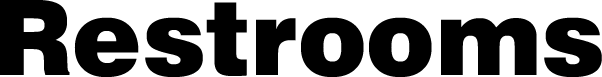
<style>
.page{position:relative;width:602px;height:77px;background:#000000}
.page>*{position:absolute;margin:0}
.t1{font:104.2px "Swiss721BT-Black";color:#000000}
</style>
<div class="page">
<p class="t1" style="left:0px;top:0px;width:602px;height:77px">Restrooms</p>
</div>
